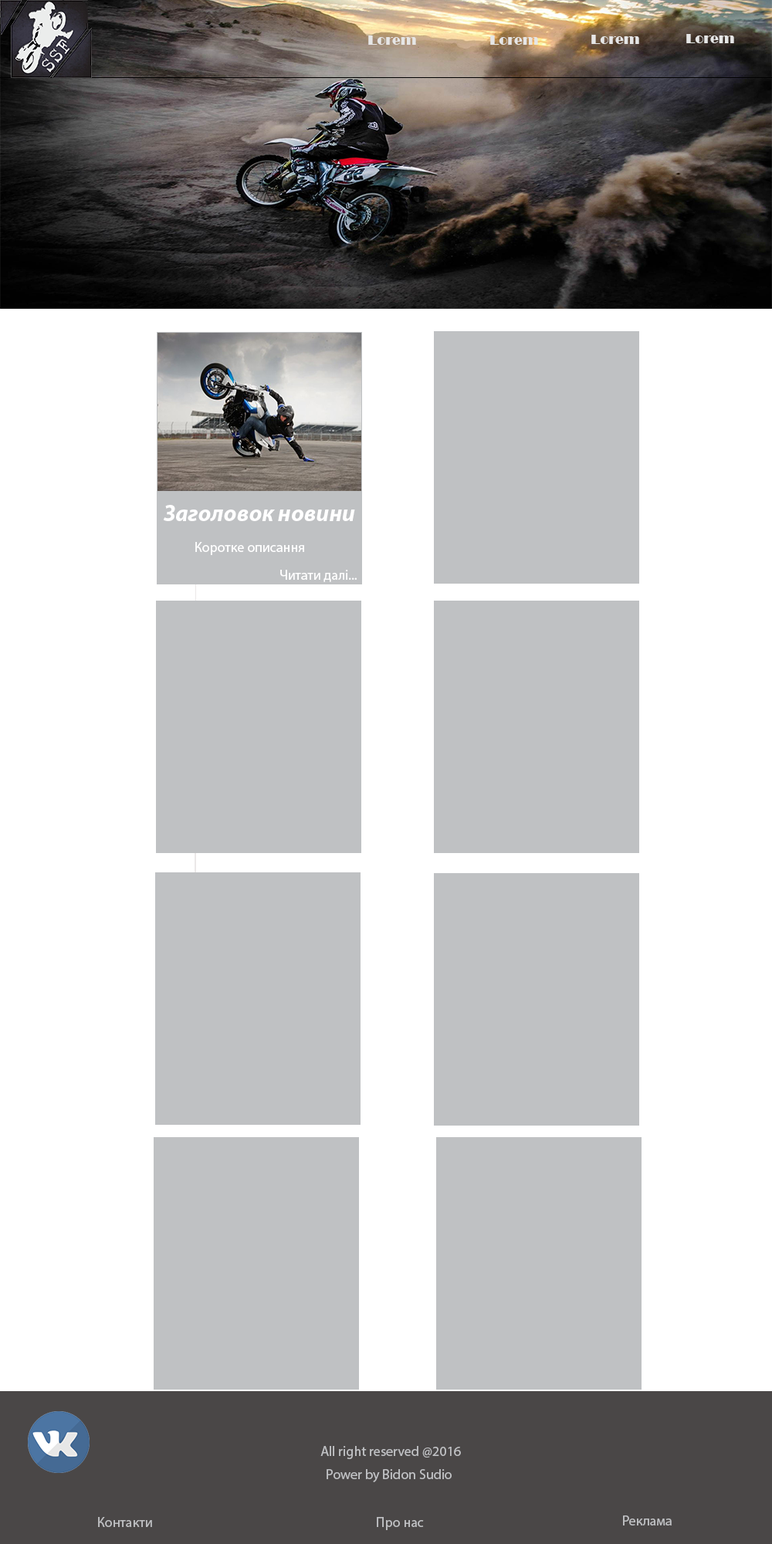
<style>
.page{position:relative;width:772px;height:1544px;background:#ffffff}
.page>*{position:absolute;margin:0}
.t1{font:13.9px "Broadway";color:#e6e6e6}
.t2{font:23.2px "MyriadPro-BoldIt";color:#ffffff}
.t3{font:13.9px "MyriadPro-Regular";color:#ffffff}
.t4{font:13.9px "MyriadPro-Regular";color:#bfc0c3}
</style>
<div class="page">
<p class="t1" style="left:368px;top:36px;width:48px;height:9px">Lorem</p>
<p class="t1" style="left:490px;top:36px;width:48px;height:9px">Lorem</p>
<p class="t1" style="left:591px;top:35px;width:48px;height:9px">Lorem</p>
<p class="t1" style="left:686px;top:34px;width:48px;height:9px">Lorem</p>
<p class="t2" style="left:163px;top:505px;width:192px;height:16px">Заголовок новини</p>
<p class="t3" style="left:195px;top:542px;width:109px;height:13px">Коротке описання</p>
<p class="t3" style="left:280px;top:570px;width:77px;height:12px">Читати далі...</p>
<p class="t4" style="left:320px;top:1446px;width:141px;height:13px">All right reserved @2016</p>
<p class="t4" style="left:327px;top:1469px;width:125px;height:14px">Power by Bidon Sudio</p>
<p class="t4" style="left:98px;top:1517px;width:54px;height:10px">Контакти</p>
<p class="t4" style="left:377px;top:1517px;width:47px;height:13px">Про нас</p>
<p class="t4" style="left:623px;top:1516px;width:49px;height:10px">Реклама</p>
</div>
